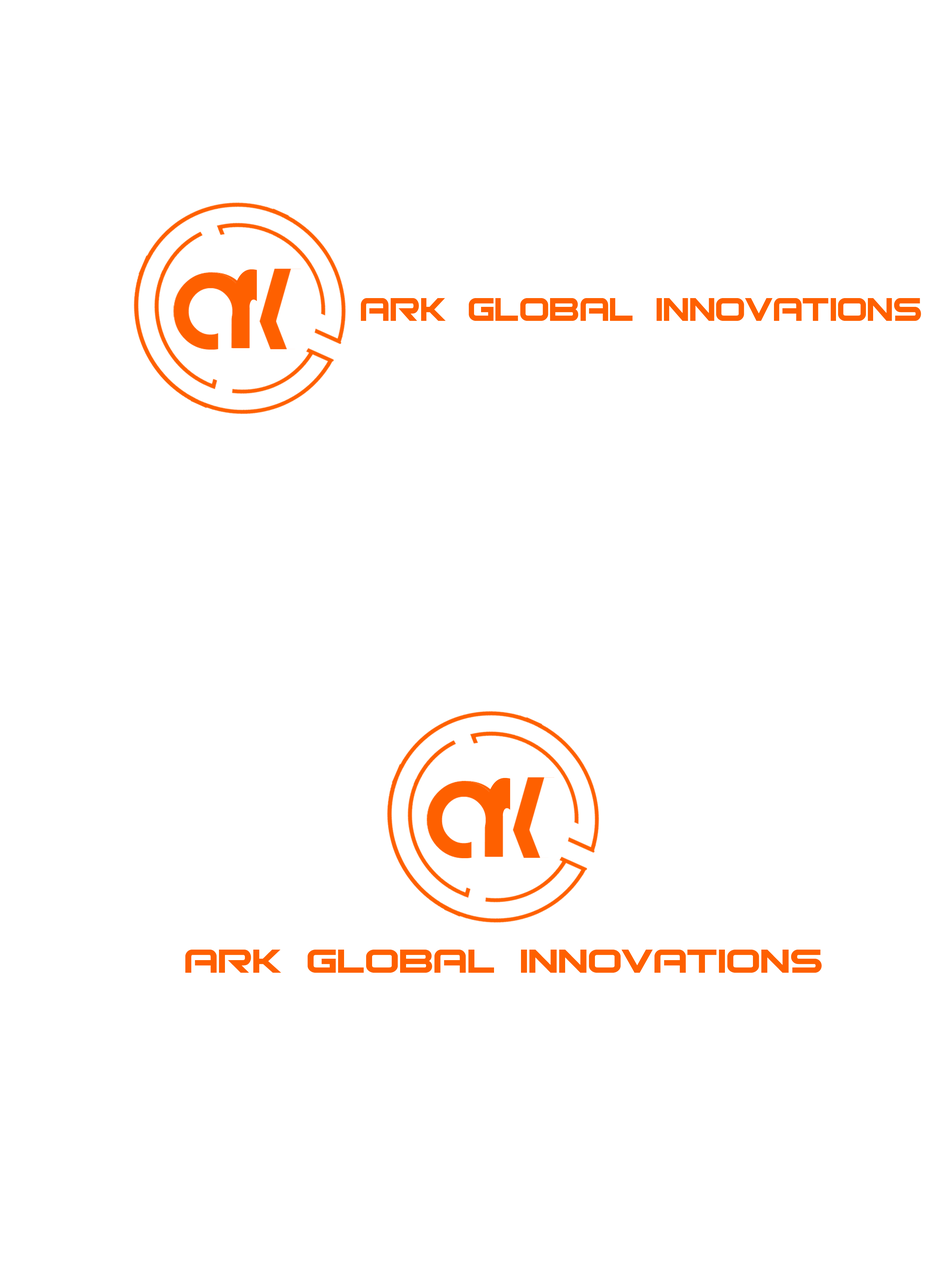
<style>
.page{position:relative;width:946px;height:1261px;background:#ffffff}
.page>*{position:absolute;margin:0}
.t1{font:158.8px "Bauhaus93";color:#fe6000;scale:0.57 1}
.t2{font:44.5px "Bitsumishi";color:#fe6000}
.t3{font:44.5px "Bitsumishi";color:#fe6000;scale:1.11 1}
</style>
<div class="page">
<p class="t1" style="left:232px;top:269px;width:25px;height:79px">r</p>
<p class="t2" style="left:361px;top:298px;width:560px;height:23px">ARK Global innovations</p>
<p class="t1" style="left:485px;top:778px;width:25px;height:79px">r</p>
<p class="t3" style="left:185px;top:950px;width:636px;height:23px">ARK Global innovations</p>
</div>
